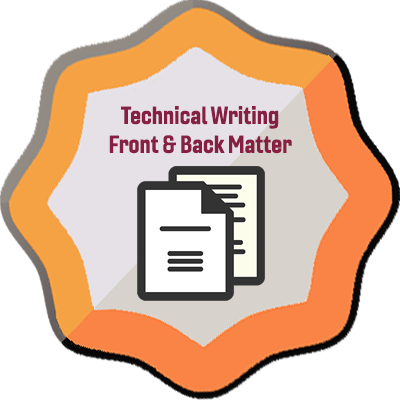
<style>
.page{position:relative;width:400px;height:400px;background:#ffffff}
.page>*{position:absolute;margin:0}
.t1{font:24px "Gineso-ConBol";color:#861f41}
</style>
<div class="page">
<p class="t1" style="left:109px;top:106px;width:183px;height:48px;text-align:center">Technical Writing<br>Front &amp; Back Matter</p>
</div>
